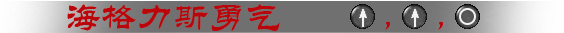
<style>
.page{position:relative;width:564px;height:33px;background:#707070}
.page>*{position:absolute;margin:0}
.t1{font:36px "STLiti";color:#ba060b}
</style>
<div class="page">
<p class="t1" style="left:67px;top:4px;width:376px;height:27px">海格力斯勇气           ，    ，</p>
</div>
